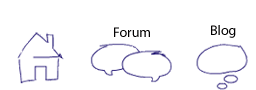
<style>
.page{position:relative;width:256px;height:90px;background:#ffffff}
.page>*{position:absolute;margin:0}
.t1{font:14px "MyriadPro-Regular";color:#020000}
</style>
<div class="page">
<p class="t1" style="left:114px;top:27px;width:36px;height:10px">Forum</p>
<p class="t1" style="left:211px;top:25px;width:25px;height:13px">Blog</p>
</div>
